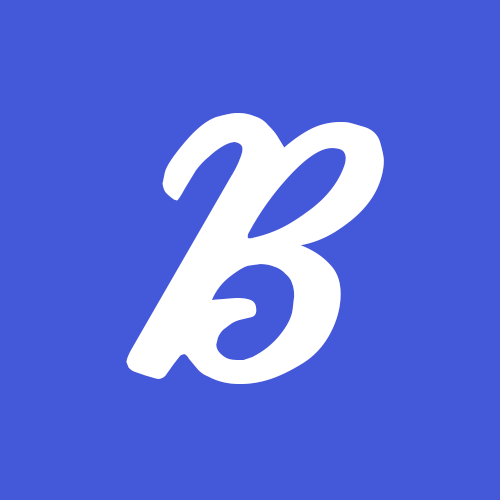
<style>
.page{position:relative;width:500px;height:500px;background:#4458da}
.page>*{position:absolute;margin:0}
.t1{font:400px "Aktuelle";color:#ffffff}
</style>
<div class="page">
<p class="t1" style="left:126px;top:113px;width:258px;height:271px">B</p>
</div>
